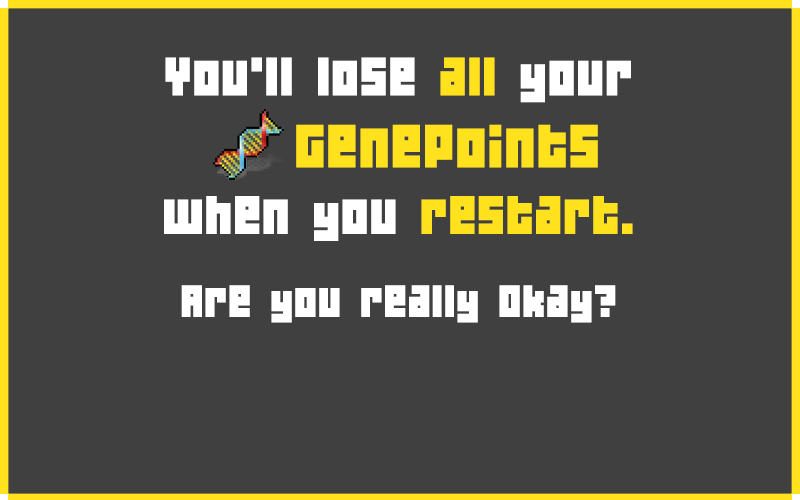
<style>
.page{position:relative;width:800px;height:500px;background:#404040}
.page>*{position:absolute;margin:0}
.t1{font:40px/90px "04b19";letter-spacing:0.025em;color:#ffffff}
.t2{font:48px/72px "04b19";letter-spacing:0.025em;color:#ffffff}
.t3{font:48px/72px "04b19";letter-spacing:0.025em;color:#ffe21d}
.t4{font:54px/72px "04b19";letter-spacing:0.025em;color:#ffe21d}
.t5{font:48px/90px "04b19";letter-spacing:0.025em;color:#ffffff}
.t6{font:48px/90px "04b19";letter-spacing:0.025em;color:#ffe21d}
</style>
<div class="page">
<p class="t1" style="left:164px;top:57px;width:469px;height:266px;text-align:center"><span class="t2">You'll lose </span><span class="t3">all</span><span class="t2"> your <br>    </span><span class="t4">GenePoints <br></span><span class="t5">when you </span><span class="t6">restart.<br></span>Are you really Okay?</p>
</div>
